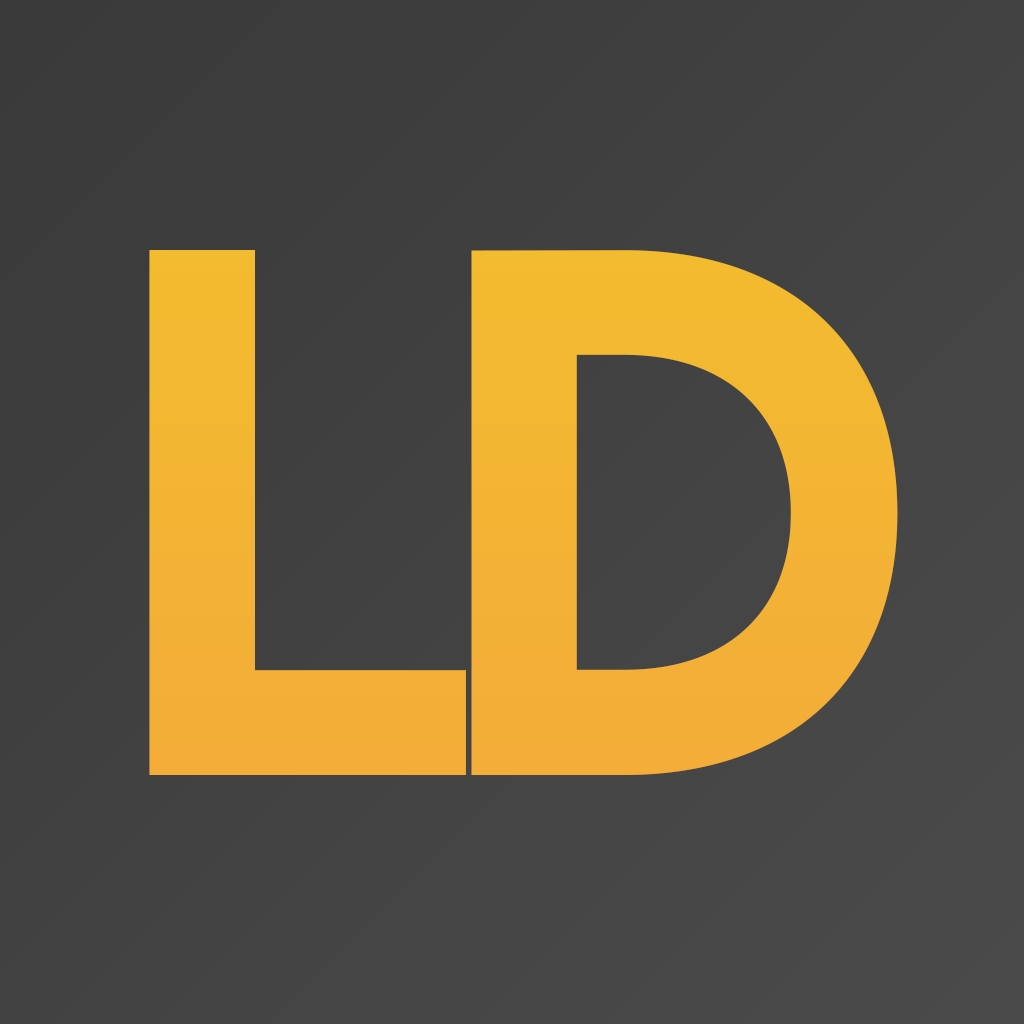
<style>
.page{position:relative;width:1024px;height:1024px}
.page>*{position:absolute;margin:0}
.t1{font:666.7px "LEMONMILK-Medium";letter-spacing:-0.08em;color:#f3ad38}
</style>
<div class="page">
<p class="t1" style="left:149px;top:250px;width:749px;height:525px">LD</p>
</div>
